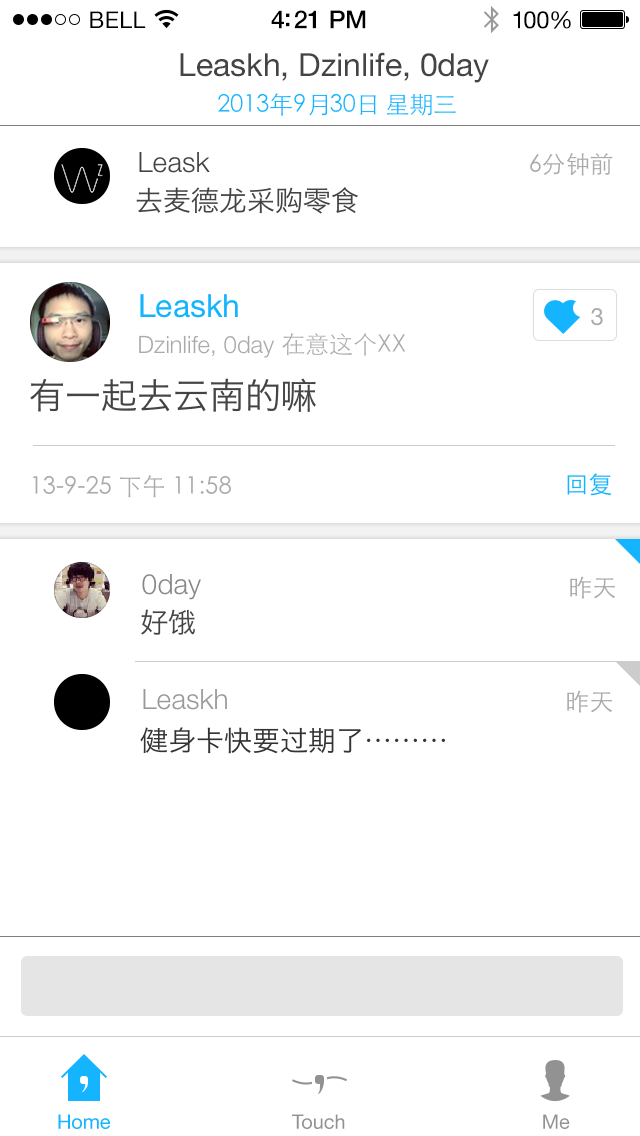
<style>
.page{position:relative;width:640px;height:1136px;background:#ffffff}
.page>*{position:absolute;margin:0}
.t1{font:23px "HelveticaNeue";letter-spacing:0.02em;color:#000000}
.t2{font:25px "HelveticaNeue-Medium";letter-spacing:-0.02em;color:#000000}
.t3{font:24px "HelveticaNeue";letter-spacing:-0.02em;color:#010101}
.t4{font:32px "HelveticaNeue";color:#444444}
.t5{font:24px "STHeitiSC-Thin";letter-spacing:-0.01em;color:#14b4ff}
.t6{font:28px "HelveticaNeue-Light";color:#444444}
.t7{font:24px "STHeitiSC-Light";color:#aaaaaa}
.t8{font:28px "HiraginoSansGB-W3";color:#444444}
.t9{font:32px "HelveticaNeue";color:#14b4ff}
.t10{font:24px "HelveticaNeue";color:#aaaaaa}
.t11{font:24px "HelveticaNeue-Light";color:#aaaaaa}
.t12{font:24px "STHeitiSC-Thin";color:#aaaaaa}
.t13{font:36px "HiraginoSansGB-W3";color:#444444}
.t14{font:24px "STHeitiSC-Light";color:#14b4ff}
.t15{font:28px "HelveticaNeue-Light";color:#888888}
.t16{font:28px "HelveticaNeue-Light";color:#999999}
.t17{font:28px "HiraginoSansGB-W3";color:#333333}
.t18{font:20px "HelveticaNeue";color:#14b4ff}
.t19{font:20px "HelveticaNeue";color:#929292}
</style>
<div class="page">
<p class="t1" style="left:90px;top:11px;width:56px;height:17px">BELL</p>
<p class="t2" style="left:271px;top:10px;width:95px;height:19px">4:21 PM</p>
<p class="t3" style="left:513px;top:11px;width:58px;height:18px">100%</p>
<p class="t4" style="left:180px;top:52px;width:309px;height:31px">Leaskh, Dzinlife, 0day</p>
<p class="t5" style="left:218px;top:93px;width:238px;height:23px">2013年9月30日 星期三</p>
<p class="t6" style="left:139px;top:152px;width:71px;height:21px">Leask</p>
<p class="t7" style="left:530px;top:153px;width:83px;height:23px">6分钟前</p>
<p class="t8" style="left:136px;top:187px;width:222px;height:27px">去麦德龙采购零食</p>
<p class="t9" style="left:140px;top:294px;width:98px;height:24px">Leaskh</p>
<p class="t10" style="left:591px;top:308px;width:12px;height:18px">3</p>
<p class="t11" style="left:139px;top:333px;width:267px;height:25px">Dzinlife, 0day <span class="t12">在意这个XX</span></p>
<p class="t13" style="left:30px;top:378px;width:286px;height:34px">有一起去云南的嘛？</p>
<p class="t14" style="left:567px;top:473px;width:45px;height:23px">回复</p>
<p class="t7" style="left:33px;top:475px;width:198px;height:23px">13-9-25 下午 11:58</p>
<p class="t15" style="left:142px;top:574px;width:59px;height:26px">0day</p>
<p class="t7" style="left:570px;top:576px;width:45px;height:23px">昨天</p>
<p class="t8" style="left:141px;top:609px;width:54px;height:26px">好饿</p>
<p class="t16" style="left:143px;top:689px;width:84px;height:21px">Leaskh</p>
<p class="t7" style="left:567px;top:690px;width:45px;height:23px">昨天</p>
<p class="t17" style="left:140px;top:727px;width:305px;height:27px">健身卡快要过期了………</p>
<p class="t18" style="left:58px;top:1114px;width:52px;height:15px">Home</p>
<p class="t19" style="left:292px;top:1114px;width:53px;height:15px">Touch</p>
<p class="t19" style="left:543px;top:1114px;width:27px;height:15px">Me</p>
</div>
